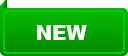
<style>
.page{position:relative;width:128px;height:56px}
.page>*{position:absolute;margin:0}
.t1{font:20px "Arial-Black";color:#ffffff}
</style>
<div class="page">
<p class="t1" style="left:37px;top:25px;width:50px;height:15px">NEW</p>
</div>
